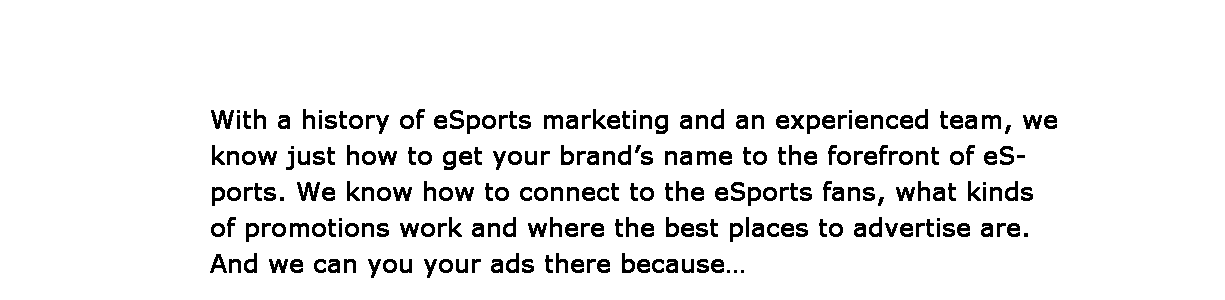
<style>
.page{position:relative;width:1225px;height:300px;background:#ffffff}
.page>*{position:absolute;margin:0}
.t1{font:24px/36px "Verdana";color:#000000;font-weight:bold}
</style>
<div class="page">
<p class="t1" style="left:210px;top:109px;width:847px;height:169px">With a history of eSports marketing and an experienced team, we know just how to get your brand’s name to the forefront of eSports. We know how to connect to the eSports fans, what kinds of promotions work and where the best places to advertise are. And we can you your ads there because…</p>
</div>
